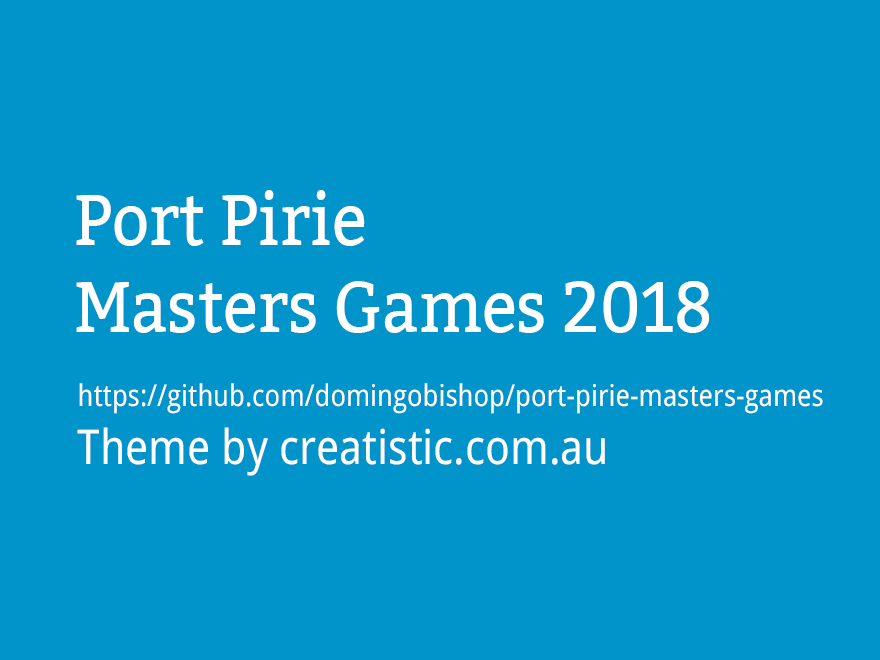
<style>
.page{position:relative;width:880px;height:660px;background:#0094ca}
.page>*{position:absolute;margin:0}
.t1{font:72px "Bitter-Regular";color:#ffffff;scale:0.9 1}
.t2{font:30px "DroidSans";color:#ffffff;scale:0.9 1}
.t3{font:48px "DroidSans";color:#ffffff;scale:0.9 1}
</style>
<div class="page">
<p class="t1" style="left:76px;top:190px;width:634px;height:143px">Port Pirie <br>Masters Games 2018</p>
<p class="t2" style="left:77px;top:383px;width:746px;height:93px">https://github.com/domingobishop/port-pirie-masters-games<br><span class="t3">Theme by creatistic.com.au</span></p>
</div>
